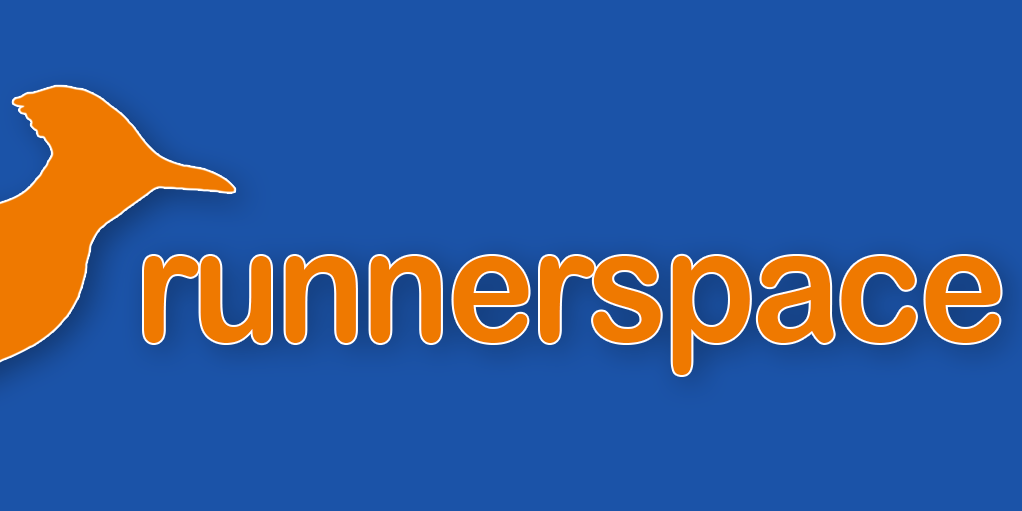
<style>
.page{position:relative;width:1022px;height:511px;background:#1b53a8}
.page>*{position:absolute;margin:0}
.t1{font:161.2px "ArialRoundedMTBold";letter-spacing:-0.03em;color:#ef7900;scale:0.92 1}
</style>
<div class="page">
<p class="t1" style="left:144px;top:255px;width:857px;height:120px">runnerspace</p>
</div>
